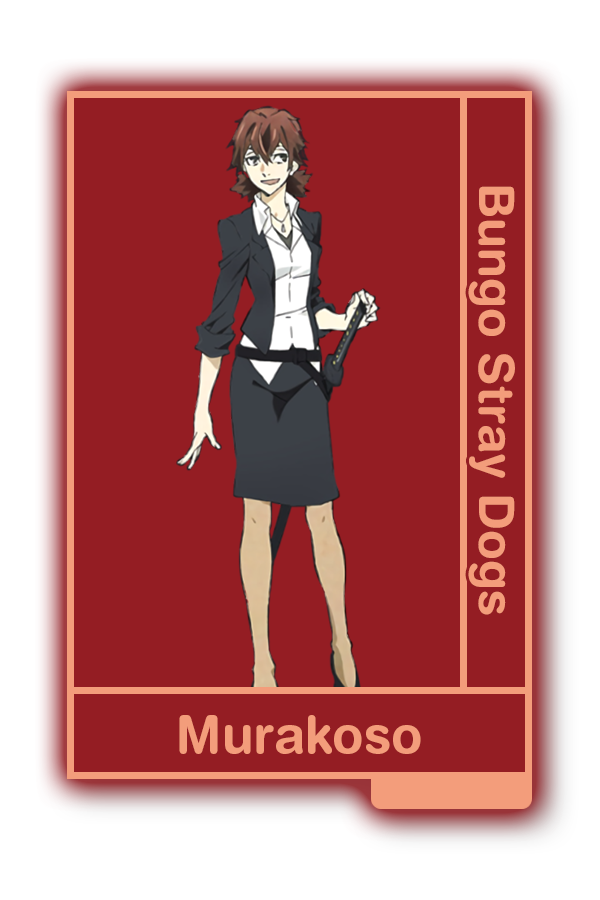
<style>
.page{position:relative;width:600px;height:900px;background:#941d23}
.page>*{position:absolute;margin:0}
.t1{font:48.8px "HelveticaRounded-Bold";color:#f39d7b}
.t2{font:51.1px "HelveticaRounded-Bold";color:#f39d7b}
</style>
<div class="page">
<p class="t1" style="left:468px;top:186px;width:47px;height:429px;rotate:90deg">Bungo Stray Dogs</p>
<p class="t2" style="left:179px;top:715px;width:242px;height:39px">Murakoso</p>
</div>
